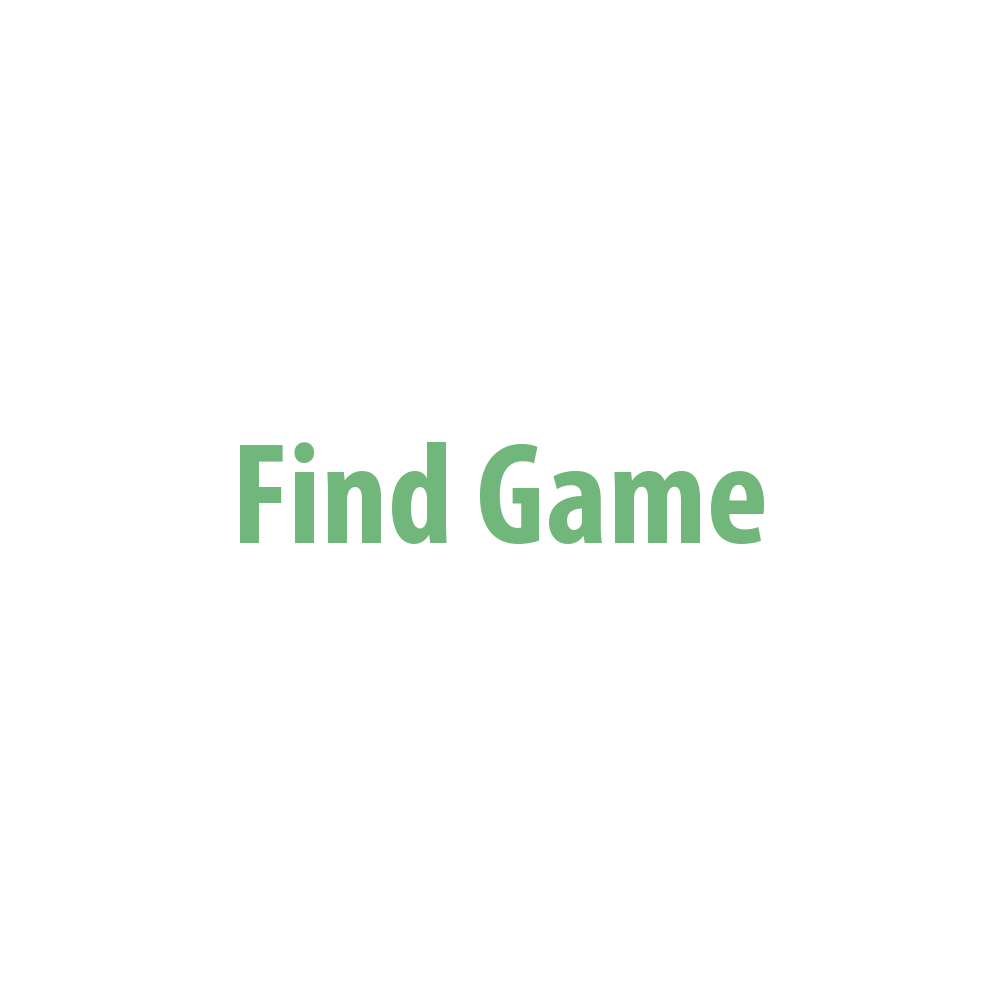
<style>
.page{position:relative;width:1000px;height:1000px;background:#ffffff}
.page>*{position:absolute;margin:0}
.t1{font:145.7px "MyriadPro-BoldCond";color:#71b67b}
</style>
<div class="page">
<p class="t1" style="left:240px;top:442px;width:524px;height:102px">Find Game</p>
</div>
